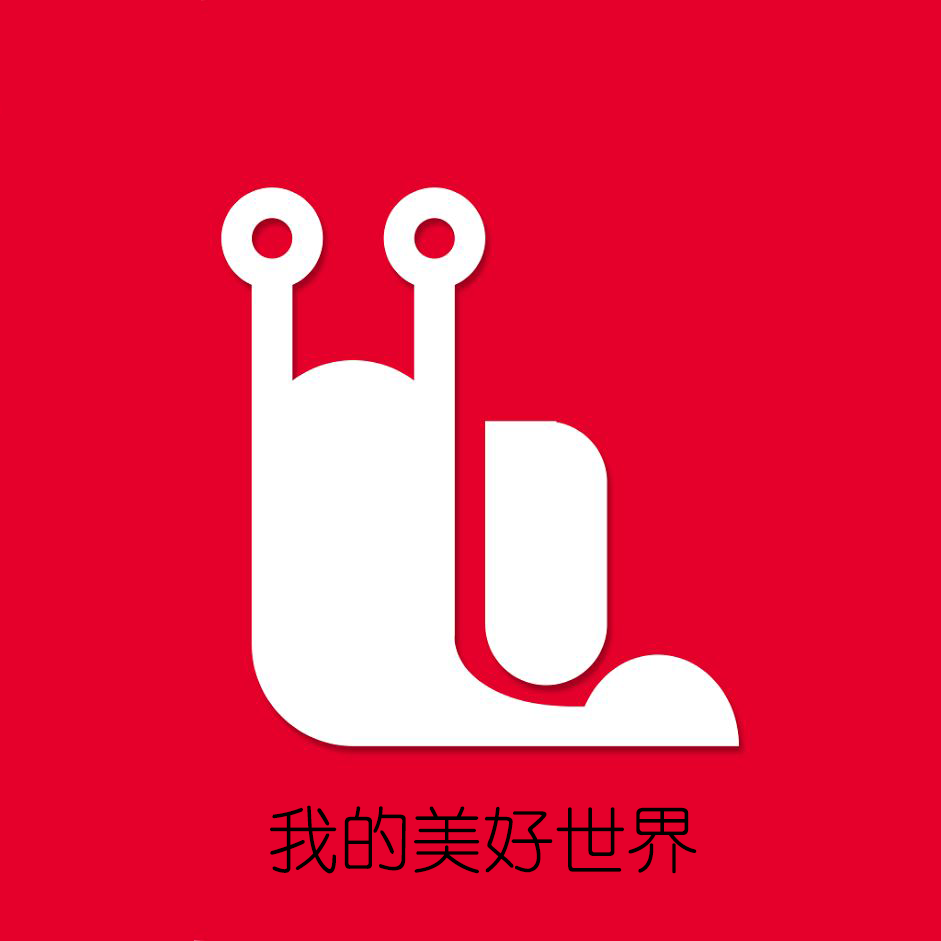
<style>
.page{position:relative;width:941px;height:941px;background:#e5002b}
.page>*{position:absolute;margin:0}
.t1{font:72px "YouYuan";color:#000000}
</style>
<div class="page">
<p class="t1" style="left:270px;top:805px;width:427px;height:69px">我的美好世界</p>
</div>
